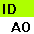
<style>
.page{position:relative;width:34px;height:34px;background:#aeff00}
.page>*{position:absolute;margin:0}
.t1{font:14px "TrebuchetMS";color:#000000;text-transform:uppercase;font-weight:bold}
</style>
<div class="page">
<p class="t1" style="left:3px;top:4px;width:13px;height:10px">ID</p>
<p class="t1" style="left:11px;top:22px;width:19px;height:10px">AO</p>
</div>
